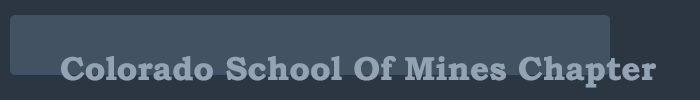
<style>
.page{position:relative;width:700px;height:100px;background:#2b3642}
.page>*{position:absolute;margin:0}
.t1{font:33.3px "BookmanOldStyle-Bold";color:#93a3b3}
</style>
<div class="page">
<p class="t1" style="left:61px;top:56px;width:595px;height:32px">Colorado School Of Mines Chapter</p>
</div>
